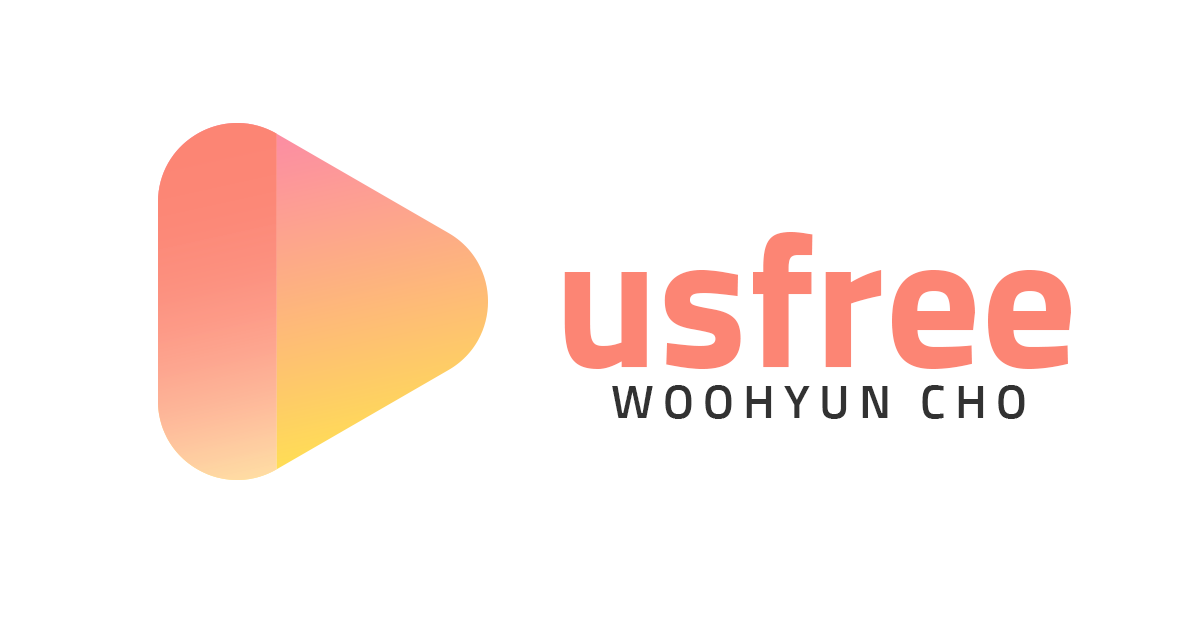
<style>
.page{position:relative;width:1200px;height:630px;background:#ffffff}
.page>*{position:absolute;margin:0}
.t1{font:188.6px "Sunflower-Bold";color:#fc8574}
.t2{font:46.5px "Sunflower-Medium";letter-spacing:0.2em;color:#323232}
</style>
<div class="page">
<p class="t1" style="left:564px;top:232px;width:507px;height:137px">usfree</p>
<p class="t2" style="left:612px;top:385px;width:413px;height:34px">WOOHYUN CHO</p>
</div>
